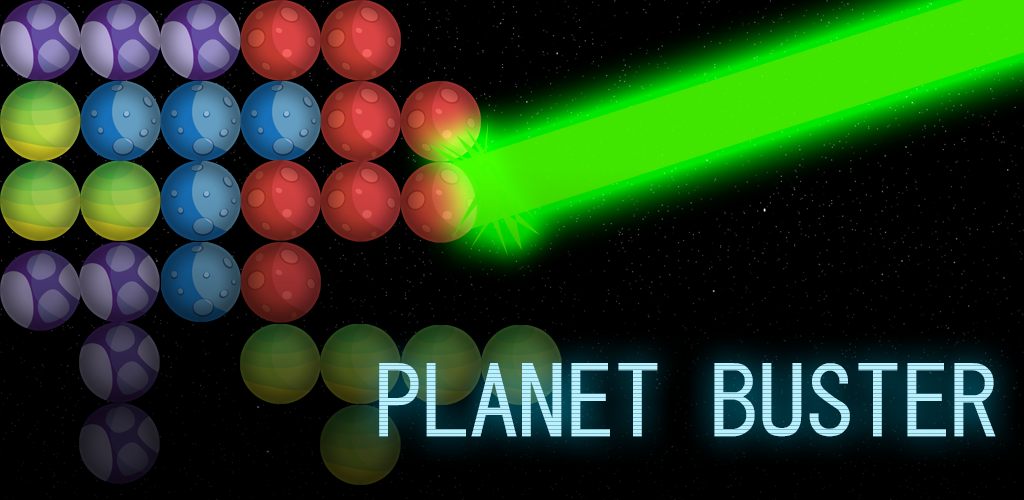
<style>
.page{position:relative;width:1024px;height:500px;background:#000000}
.page>*{position:absolute;margin:0}
.t1{font:96px "MS-Gothic";color:#a4edff;text-transform:uppercase}
</style>
<div class="page">
<p class="t1" style="left:379px;top:363px;width:617px;height:74px">Planet Buster</p>
</div>
